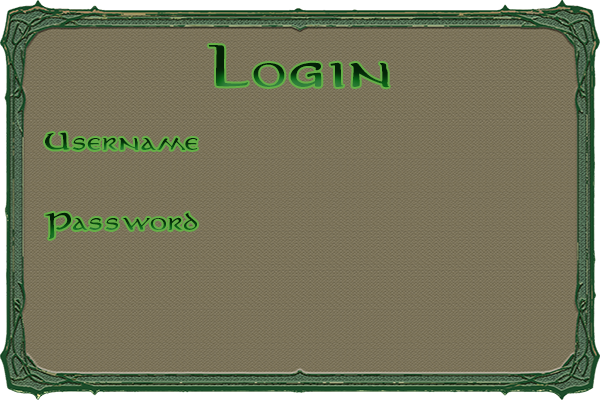
<style>
.page{position:relative;width:600px;height:400px}
.page>*{position:absolute;margin:0}
.t1{font:48px "MiddleEarth";scale:1.13 1}
.t2{font:24px "MiddleEarth";scale:1.13 1}
</style>
<div class="page">
<p class="t1" style="left:208px;top:45px;width:181px;height:43px">Login</p>
<p class="t2" style="left:45px;top:132px;width:153px;height:18px">Username</p>
<p class="t2" style="left:45px;top:212px;width:152px;height:27px">Password</p>
</div>
